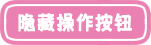
<style>
.page{position:relative;width:151px;height:45px;background:#eb81b2}
.page>*{position:absolute;margin:0}
.t1{font:12px "shetumodengxiaofangti";color:#ffffff;font-weight:bold;scale:0.94 1}
</style>
<div class="page">
<p class="t1" style="left:18px;top:13px;width:114px;height:19px">隐藏操作按钮</p>
</div>
